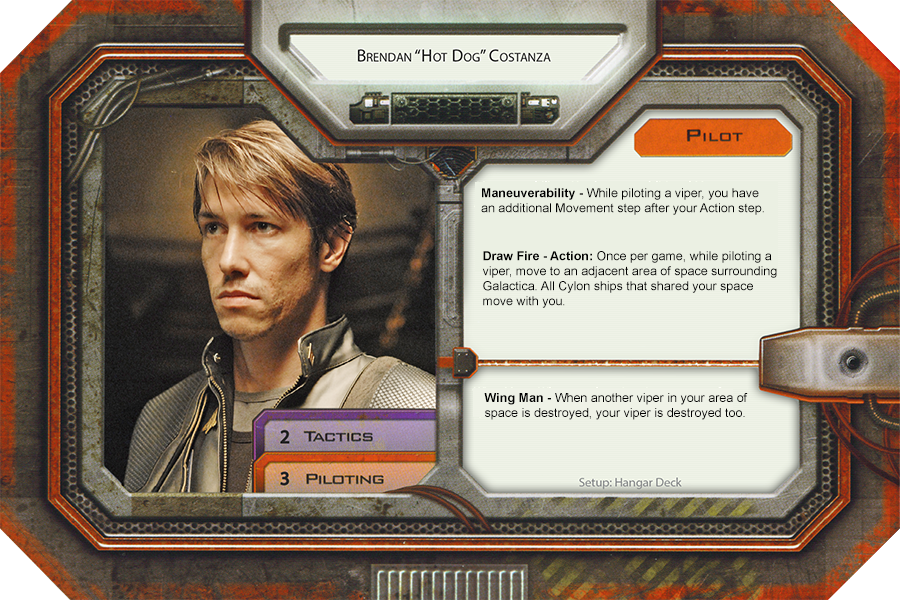
<style>
.page{position:relative;width:900px;height:600px}
.page>*{position:absolute;margin:0}
.t1{font:12.5px "ArialMT";color:#000000}
.t2{font:12.5px "Arial-BoldMT";color:#000000}
</style>
<div class="page">
<p class="t1" style="left:481px;top:188px;width:283px;height:27px"><span class="t2">Maneuverability -</span> While piloting a viper, you have <br>an additional Movement step after your Action step.</p>
<p class="t1" style="left:482px;top:251px;width:295px;height:57px"><span class="t2">Draw Fire - Action:</span> Once per game, while piloting a<br>viper, move to an adjacent area of space surrounding <br>Galactica. All Cylon ships that shared your space <br>move with you.</p>
<p class="t1" style="left:484px;top:393px;width:264px;height:27px"><span class="t2">Wing Man -</span> When another viper in your area of <br>space is destroyed, your viper is destroyed too.</p>
</div>
